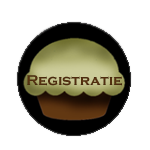
<style>
.page{position:relative;width:150px;height:150px;background:#ffffff}
.page>*{position:absolute;margin:0}
.t1{font:14.7px "CopperplateGothic-Bold";color:#623812}
</style>
<div class="page">
<p class="t1" style="left:27px;top:75px;width:95px;height:11px">Registratie</p>
</div>
